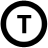
<style>
.page{position:relative;width:48px;height:48px;background:#ffffff}
.page>*{position:absolute;margin:0}
.t1{font:24px "MicrosoftYaHei-Bold";color:#000000}
</style>
<div class="page">
<p class="t1" style="left:17px;top:15px;width:15px;height:19px">T</p>
</div>
